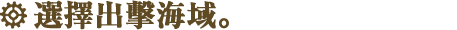
<style>
.page{position:relative;width:457px;height:30px;background:#ffffff}
.page>*{position:absolute;margin:0}
.t1{font:30px "RyuminPr6N-ExBold";color:#5f4a23;font-weight:bold}
</style>
<div class="page">
<p class="t1" style="left:34px;top:0px;width:195px;height:30px">選擇出擊海域。</p>
</div>
